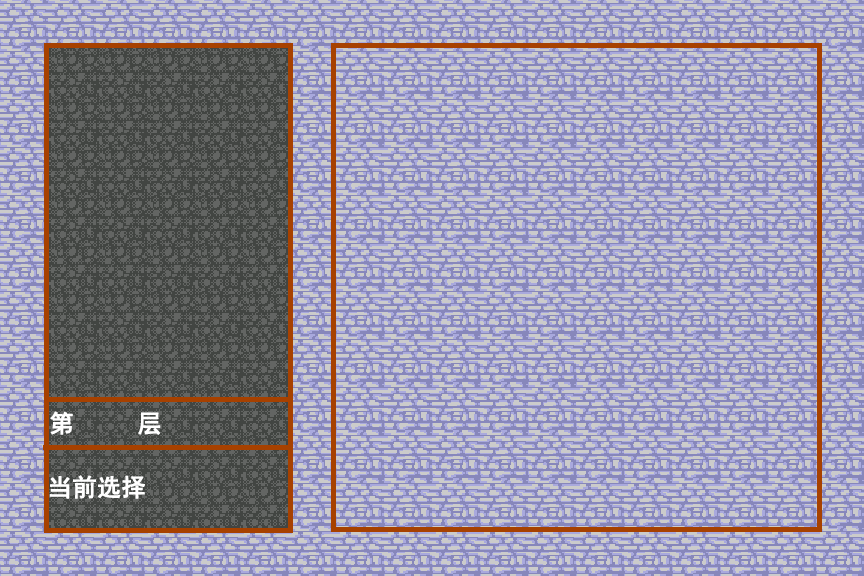
<style>
.page{position:relative;width:864px;height:576px;background:#8787bb}
.page>*{position:absolute;margin:0}
.t1{font:24px "SimHei";color:#ffffff;font-weight:bold}
</style>
<div class="page">
<p class="t1" style="left:50px;top:411px;width:111px;height:24px">第     层</p>
<p class="t1" style="left:49px;top:475px;width:96px;height:24px">当前选择</p>
</div>
